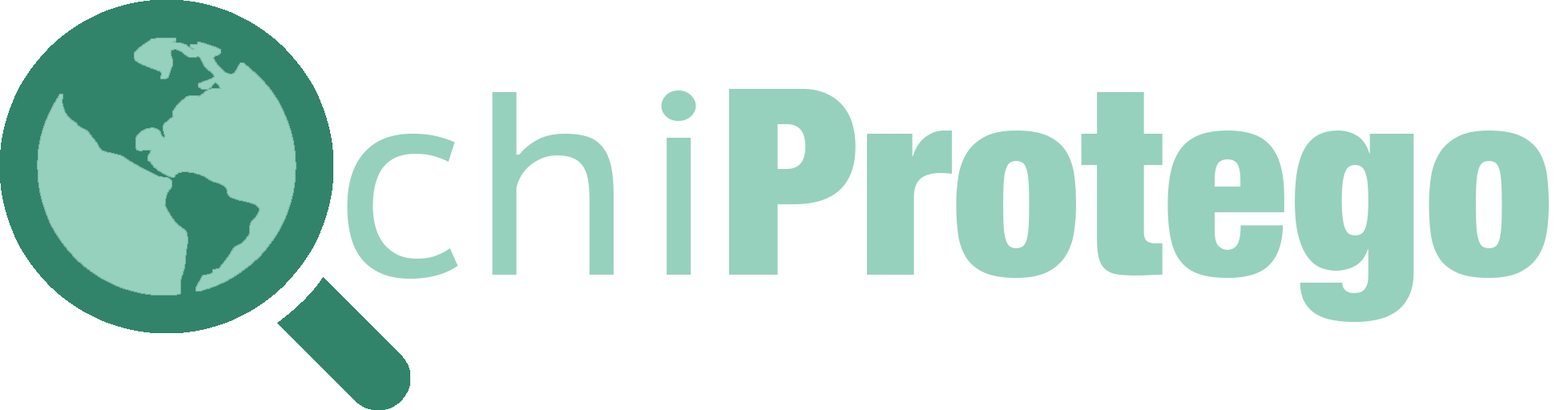
<style>
.page{position:relative;width:1568px;height:410px;background:#ffffff}
.page>*{position:absolute;margin:0}
.t1{font:260.4px "HelveticaNeue-CondensedBlack";color:#96d1be}
.t2{font:260.4px "PTSans-Caption";color:#96d1be}
</style>
<div class="page">
<p class="t1" style="left:347px;top:89px;width:1202px;height:233px"><span class="t2">chi</span>Protego</p>
</div>
